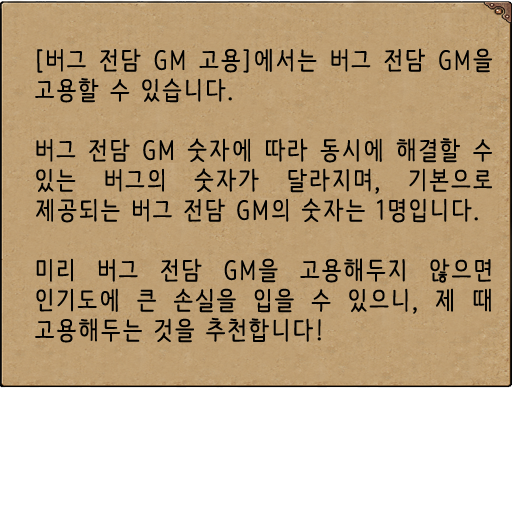
<style>
.page{position:relative;width:512px;height:512px;background:#ffffff}
.page>*{position:absolute;margin:0}
.t1{font:25px "NanumBarunpen";letter-spacing:0.075em;color:#000000;font-weight:bold}
</style>
<div class="page">
<p class="t1" style="left:35px;top:48px;width:457px;height:295px;text-align:justify">[버그 전담 GM 고용]에서는 버그 전담 GM을 고용할 수 있습니다.<br><br>버그 전담 GM 숫자에 따라 동시에 해결할 수 있는 버그의 숫자가 달라지며, 기본으로 제공되는 버그 전담 GM의 숫자는 1명입니다.<br><br>미리 버그 전담 GM을 고용해두지 않으면 인기도에 큰 손실을 입을 수 있으니, 제 때 고용해두는 것을 추천합니다!</p>
</div>
